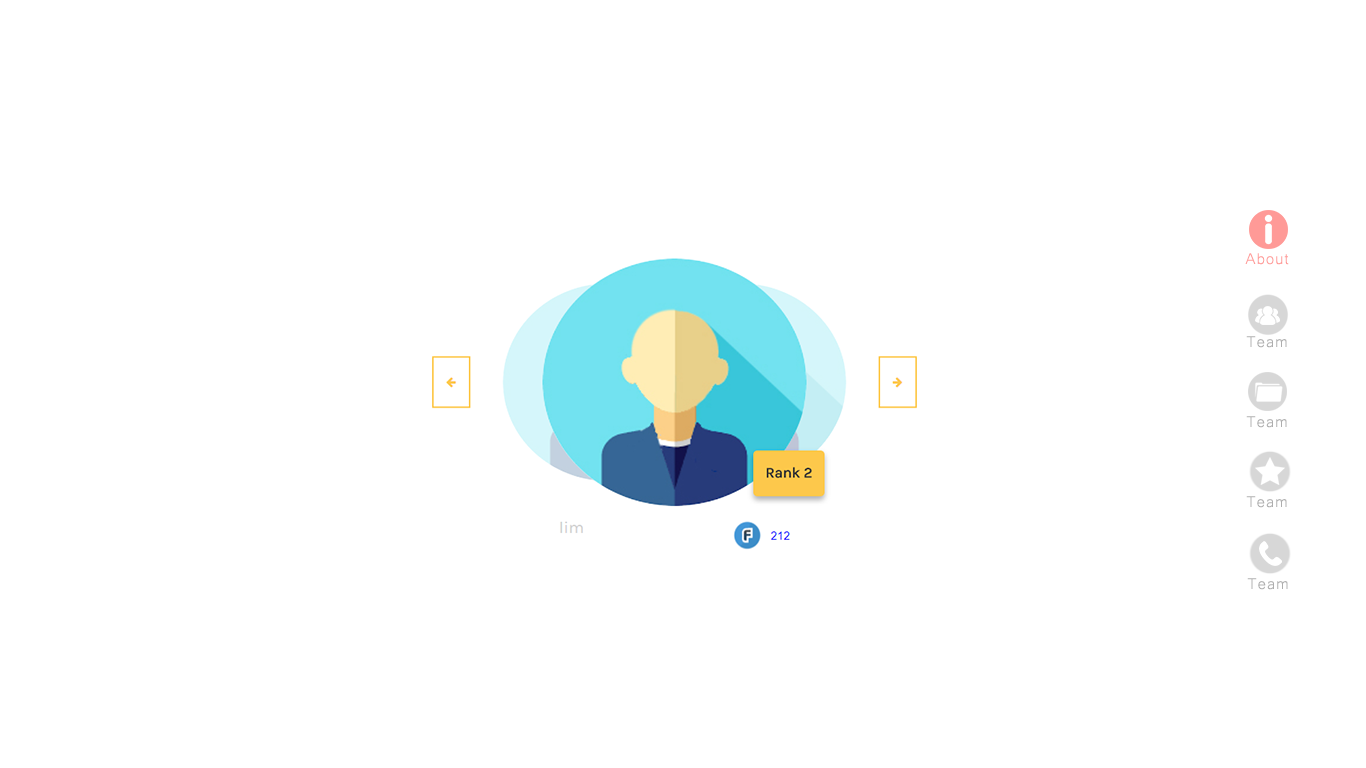
<style>
.page{position:relative;width:1366px;height:768px;background:#ffffff}
.page>*{position:absolute;margin:0}
.t1{font:20px "Microsoft-Yi-Baiti";letter-spacing:0.05em;color:#ff9a97}
.t2{font:20px "Microsoft-Yi-Baiti";letter-spacing:0.05em;color:#aeaeae}
</style>
<div class="page">
<p class="t1" style="left:1245px;top:253px;width:44px;height:12px">About</p>
<p class="t2" style="left:1246px;top:336px;width:41px;height:12px">Team</p>
<p class="t2" style="left:1246px;top:416px;width:41px;height:12px">Team</p>
<p class="t2" style="left:1246px;top:496px;width:41px;height:12px">Team</p>
<p class="t2" style="left:1247px;top:578px;width:41px;height:12px">Team</p>
</div>
